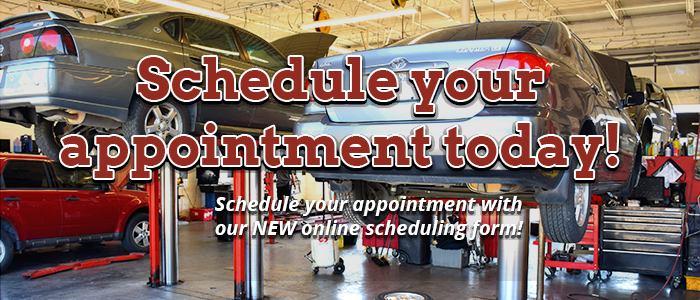
<style>
.page{position:relative;width:700px;height:300px}
.page>*{position:absolute;margin:0}
.t1{font:55px "Arvo-Bold";color:#942b20}
.t2{font:20px "OpenSans-BoldItalic";color:#fefffe}
</style>
<div class="page">
<p class="t1" style="left:61px;top:57px;width:557px;height:121px;text-align:center">Schedule your <br>appointment today!</p>
<p class="t2" style="left:215px;top:196px;width:309px;height:44px;text-align:center">Schedule your appointment with <br>our NEW online scheduling form!</p>
</div>
